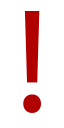
<style>
.page{position:relative;width:64px;height:128px;background:#ffffff}
.page>*{position:absolute;margin:0}
.t1{font:150px "MyriadPro-Regular";color:#b10000}
</style>
<div class="page">
<p class="t1" style="left:23px;top:11px;width:18px;height:102px">!</p>
</div>
